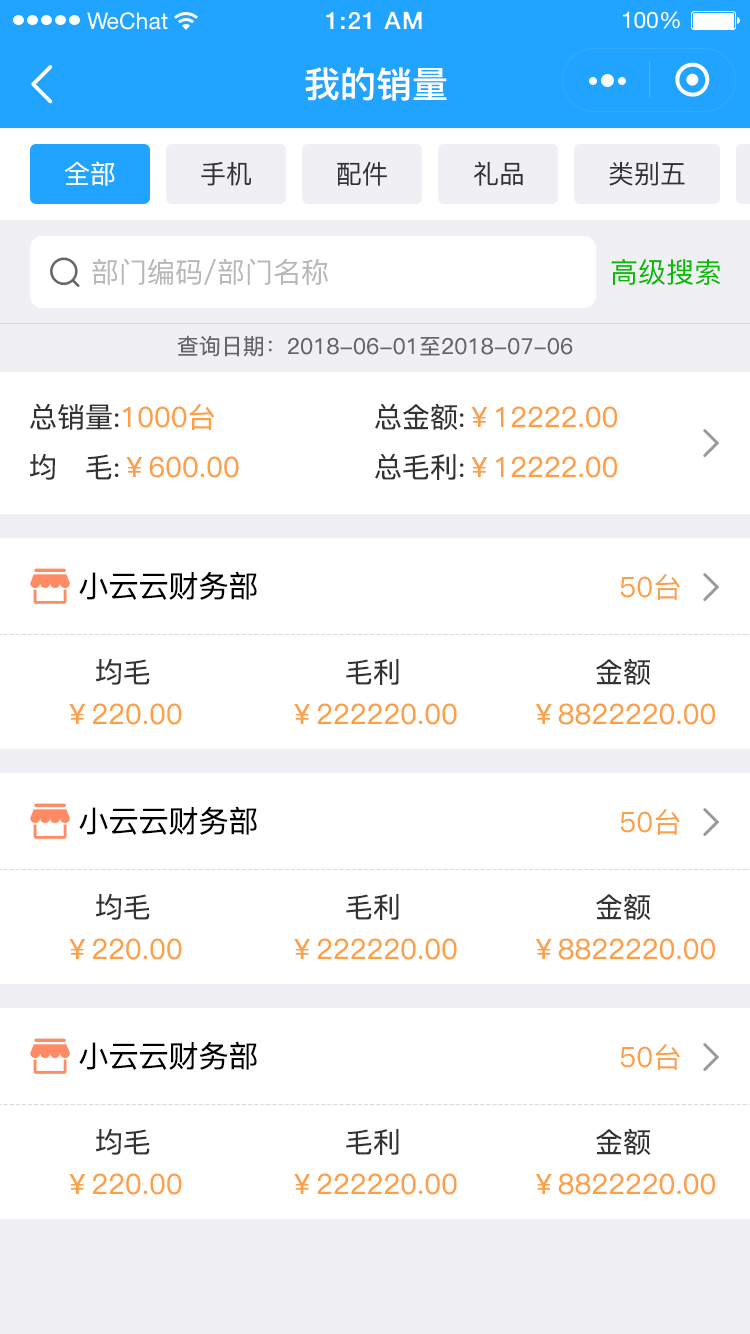
<style>
.page{position:relative;width:750px;height:1334px;background:#ffffff}
.page>*{position:absolute;margin:0}
.t1{font:36px "PingFang-SC-Bold";color:#ffffff}
.t2{font:26px "PingFang-SC-Medium";color:#ffffff}
.t3{font:26px "PingFang-SC-Medium";color:#333333}
.t4{font:28px "PingFang-SC-Medium";color:#b8b8b8}
.t5{font:28px "PingFang-SC-Medium";color:#09bb07}
.t6{font:22px "PingFang-SC-Medium";color:#666666}
.t7{font:28px "PingFang-SC-Medium";color:#fe9f45}
.t8{font:28px "PingFang-SC-Medium";color:#333333}
.t9{font:30px "PingFang-SC-Medium";color:#000000}
.t10{font:28px/42px "PingFang-SC-Medium";color:#fe9f45}
.t11{font:28px/42px "PingFang-SC-Medium";color:#333333}
</style>
<div class="page">
<p class="t1" style="left:305px;top:67px;width:142px;height:34px">我的销量</p>
<p class="t2" style="left:65px;top:161px;width:50px;height:25px">全部</p>
<p class="t3" style="left:201px;top:161px;width:50px;height:25px">手机</p>
<p class="t3" style="left:337px;top:161px;width:50px;height:25px">配件</p>
<p class="t3" style="left:474px;top:161px;width:49px;height:25px">礼品</p>
<p class="t3" style="left:609px;top:161px;width:76px;height:25px">类别五</p>
<p class="t4" style="left:92px;top:259px;width:236px;height:26px">部门编码/部门名称</p>
<p class="t5" style="left:611px;top:259px;width:109px;height:26px">高级搜索</p>
<p class="t6" style="left:177px;top:335px;width:396px;height:22px">查询日期：2018-06-01至2018-07-06</p>
<p class="t7" style="left:30px;top:403px;width:185px;height:27px"><span class="t8">总销量:</span>1000台</p>
<p class="t7" style="left:375px;top:403px;width:242px;height:27px"><span class="t8">总金额:</span>￥12222.00</p>
<p class="t7" style="left:30px;top:453px;width:209px;height:27px"><span class="t8">均   毛:</span>￥600.00</p>
<p class="t7" style="left:375px;top:453px;width:242px;height:27px"><span class="t8">总毛利:</span>￥12222.00</p>
<p class="t9" style="left:79px;top:571px;width:178px;height:29px">小云云财务部</p>
<p class="t7" style="left:620px;top:574px;width:60px;height:26px">50台</p>
<p class="t10" style="left:69px;top:658px;width:113px;height:67px;text-align:center"><span class="t11">均毛<br></span>￥220.00</p>
<p class="t10" style="left:294px;top:659px;width:163px;height:66px;text-align:center"><span class="t11">毛利<br></span>￥222220.00</p>
<p class="t10" style="left:535px;top:658px;width:180px;height:67px;text-align:center"><span class="t11">金额<br></span>￥8822220.00</p>
<p class="t9" style="left:79px;top:806px;width:178px;height:29px">小云云财务部</p>
<p class="t7" style="left:620px;top:809px;width:60px;height:26px">50台</p>
<p class="t10" style="left:69px;top:893px;width:113px;height:67px;text-align:center"><span class="t11">均毛<br></span>￥220.00</p>
<p class="t10" style="left:294px;top:894px;width:163px;height:66px;text-align:center"><span class="t11">毛利<br></span>￥222220.00</p>
<p class="t10" style="left:535px;top:893px;width:180px;height:67px;text-align:center"><span class="t11">金额<br></span>￥8822220.00</p>
<p class="t9" style="left:79px;top:1041px;width:178px;height:29px">小云云财务部</p>
<p class="t7" style="left:620px;top:1044px;width:60px;height:26px">50台</p>
<p class="t10" style="left:69px;top:1128px;width:113px;height:67px;text-align:center"><span class="t11">均毛<br></span>￥220.00</p>
<p class="t10" style="left:294px;top:1129px;width:163px;height:66px;text-align:center"><span class="t11">毛利<br></span>￥222220.00</p>
<p class="t10" style="left:535px;top:1128px;width:180px;height:67px;text-align:center"><span class="t11">金额<br></span>￥8822220.00</p>
</div>
